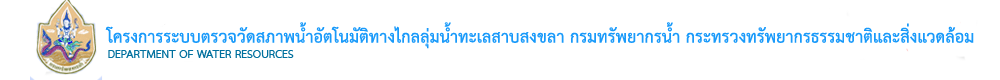
<style>
.page{position:relative;width:1000px;height:80px;background:#ffffff}
.page>*{position:absolute;margin:0}
.t1{font:24px "THSarabunPSK-Bold";color:#199afa}
.t2{font:16px "THSarabunNew-Bold";color:#00709e}
</style>
<div class="page">
<p class="t1" style="left:105px;top:22px;width:869px;height:27px">โครงการระบบตรวจวัดสภาพน้ำอัตโนมัติทางไกลลุ่มน้ำทะเลสาบสงขลา กรมทรัพยากรน้ำ กระทรวงทรัพยากรธรรมชาติและสิ่งแวดล้อม</p>
<p class="t2" style="left:108px;top:50px;width:186px;height:8px">DEPARTMENT OF WATER RESOURCES</p>
</div>
